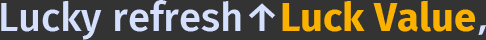
<style>
.page{position:relative;width:486px;height:40px;background:#333333}
.page>*{position:absolute;margin:0}
.t1{font:40px "FiraSans-Medium";color:#d5e0ff}
.t2{font:40px "FiraSans-Bold";color:#fbb100}
.t3{font:40px "AdobeHeitiStd-Regular";color:#d5e0ff}
</style>
<div class="page">
<p class="t1" style="left:1px;top:0px;width:485px;height:40px">Lucky refresh↑<span class="t2">Luck Value</span><span class="t3">，</span></p>
</div>
